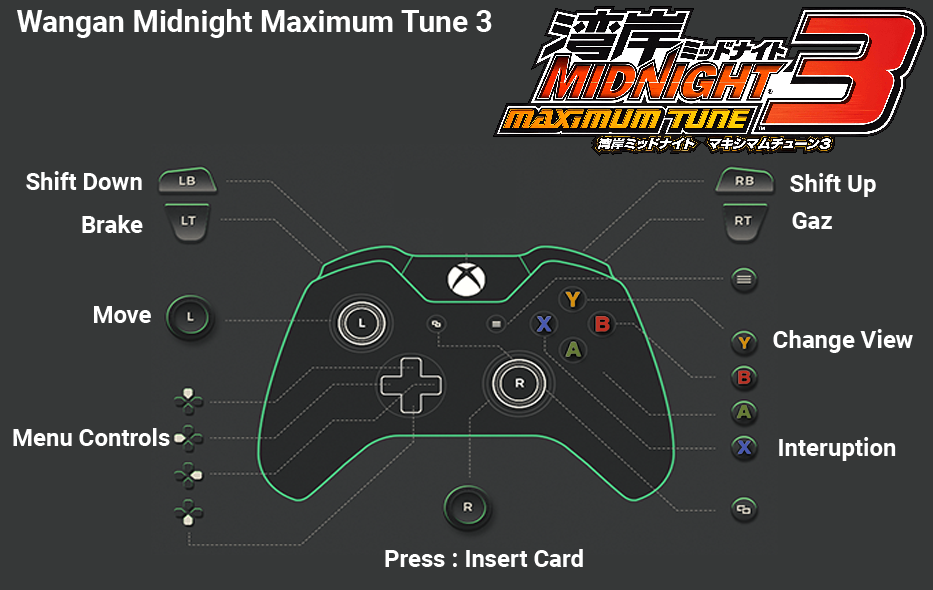
<style>
.page{position:relative;width:933px;height:590px;background:#363838}
.page>*{position:absolute;margin:0}
.t1{font:30px "Roboto-Bold";color:#ffffff}
.t2{font:24px "Roboto-Bold";color:#ffffff}
</style>
<div class="page">
<p class="t1" style="left:17px;top:9px;width:475px;height:29px">Wangan Midnight Maximum Tune 3</p>
<p class="t2" style="left:26px;top:171px;width:116px;height:19px">Shift Down</p>
<p class="t2" style="left:790px;top:173px;width:86px;height:24px">Shift Up</p>
<p class="t2" style="left:82px;top:215px;width:61px;height:18px">Brake</p>
<p class="t2" style="left:792px;top:212px;width:40px;height:17px">Gaz</p>
<p class="t2" style="left:94px;top:306px;width:57px;height:17px">Move</p>
<p class="t2" style="left:773px;top:329px;width:140px;height:24px">Change View</p>
<p class="t2" style="left:13px;top:428px;width:157px;height:18px">Menu Controls</p>
<p class="t2" style="left:779px;top:437px;width:117px;height:24px">Interuption</p>
<p class="t2" style="left:385px;top:549px;width:198px;height:18px">Press : Insert Card</p>
</div>
